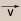
<style>
.page{position:relative;width:21px;height:21px;background:#d9cdc1}
.page>*{position:absolute;margin:0}
.t1{font:9px "Tahoma";color:#000000}
</style>
<div class="page">
<p class="t1" style="left:7px;top:9px;width:7px;height:7px">V</p>
</div>
